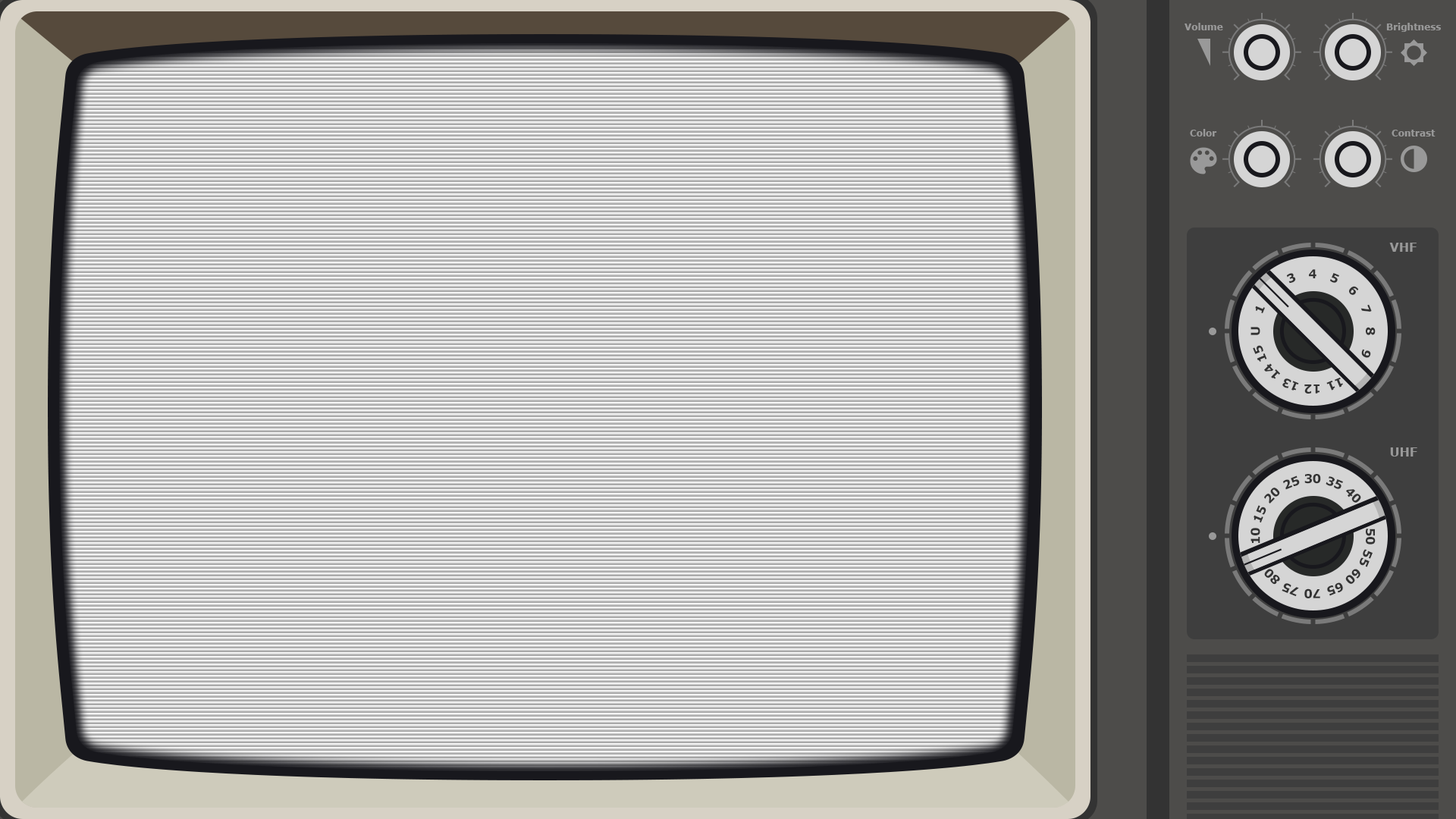
<style>
.page{position:relative;width:1456px;height:819px}
.page>*{position:absolute;margin:0}
.t1{font:9.1px "Verdana-Bold";color:#999999}
.t2{font:12.1px "Verdana-Bold";color:#999999}
.t3{font:12.1px "Verdana-Bold";color:#333333}
.t4{font:12.1px "Verdana-Bold";color:#d5d5d5}
</style>
<div class="page">
<p class="t1" style="left:1185px;top:23px;width:38px;height:7px">Volume</p>
<p class="t1" style="left:1386px;top:23px;width:55px;height:9px">Brightness</p>
<p class="t1" style="left:1190px;top:129px;width:27px;height:7px">Color</p>
<p class="t1" style="left:1392px;top:130px;width:44px;height:6px">Contrast</p>
<p class="t2" style="left:1389px;top:243px;width:28px;height:9px">VHF</p>
<p class="t3" style="left:1309px;top:269px;width:7px;height:9px">4</p>
<p class="t3" style="left:1286px;top:273px;width:10px;height:11px;rotate:-22deg">3</p>
<p class="t3" style="left:1330px;top:273px;width:9px;height:10px;rotate:22deg">5</p>
<p class="t3" style="left:1349px;top:286px;width:10px;height:9px;rotate:45deg">6</p>
<p class="t3" style="left:1255px;top:306px;width:10px;height:7px;rotate:-68deg">1</p>
<p class="t3" style="left:1360px;top:304px;width:12px;height:8px;rotate:68deg">7</p>
<p class="t3" style="left:1250px;top:327px;width:10px;height:8px;rotate:-90deg">U</p>
<p class="t3" style="left:1366px;top:327px;width:10px;height:8px;rotate:90deg">8</p>
<p class="t3" style="left:1253px;top:345px;width:14px;height:17px;rotate:-112deg">15</p>
<p class="t3" style="left:1361px;top:349px;width:10px;height:9px;rotate:112deg">9</p>
<p class="t3" style="left:1264px;top:363px;width:16px;height:16px;rotate:-135deg">14</p>
<p class="t3" style="left:1326px;top:378px;width:17px;height:13px;rotate:158deg">11</p>
<p class="t3" style="left:1282px;top:378px;width:17px;height:13px;rotate:-158deg">13</p>
<p class="t3" style="left:1304px;top:384px;width:15px;height:10px;rotate:180deg">12</p>
<p class="t2" style="left:1390px;top:447px;width:27px;height:10px">UHF</p>
<p class="t3" style="left:1304px;top:474px;width:17px;height:10px">30</p>
<p class="t3" style="left:1283px;top:475px;width:17px;height:15px;rotate:-22deg">25</p>
<p class="t3" style="left:1326px;top:476px;width:17px;height:13px;rotate:22deg">35</p>
<p class="t3" style="left:1264px;top:488px;width:16px;height:16px;rotate:-45deg">20</p>
<p class="t3" style="left:1346px;top:489px;width:15px;height:14px;rotate:45deg">40</p>
<p class="t3" style="left:1254px;top:505px;width:12px;height:17px;rotate:-68deg">15</p>
<p class="t3" style="left:1250px;top:528px;width:10px;height:15px;rotate:-90deg">10</p>
<p class="t3" style="left:1366px;top:529px;width:10px;height:15px;rotate:90deg">50</p>
<p class="t4" style="left:1253px;top:550px;width:13px;height:17px;rotate:-112deg">85</p>
<p class="t3" style="left:1360px;top:549px;width:13px;height:18px;rotate:112deg">55</p>
<p class="t3" style="left:1264px;top:569px;width:16px;height:16px;rotate:-135deg">80</p>
<p class="t3" style="left:1345px;top:569px;width:15px;height:15px;rotate:135deg">60</p>
<p class="t3" style="left:1282px;top:583px;width:17px;height:14px;rotate:-158deg">75</p>
<p class="t3" style="left:1304px;top:588px;width:16px;height:10px;rotate:180deg">70</p>
<p class="t3" style="left:1327px;top:582px;width:16px;height:14px;rotate:158deg">65</p>
</div>
